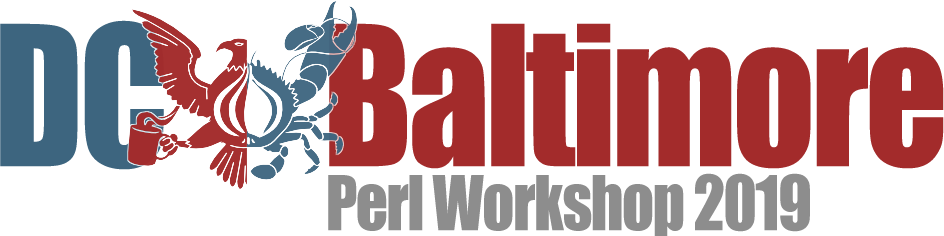
<style>
.page{position:relative;width:944px;height:236px;background:#ffffff}
.page>*{position:absolute;margin:0}
.t1{font:180px "Impact";letter-spacing:-0.025em;color:#a32b2b;scale:0.9 1}
.t2{font:180px "Impact";letter-spacing:-0.025em;color:#3d657f;scale:0.9 1}
.t3{font:70px "Impact";letter-spacing:-0.025em;color:#8d8d8d;scale:0.9 1}
</style>
<div class="page">
<p class="t1" style="left:0px;top:20px;width:944px;height:150px"><span class="t2">DC        </span>Baltimore</p>
<p class="t3" style="left:328px;top:173px;width:482px;height:64px">Perl Workshop 2019</p>
</div>
